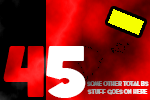
<style>
.page{position:relative;width:150px;height:100px}
.page>*{position:absolute;margin:0}
.t1{font:66px "WhoopAss"}
.t2{font:66px "WhoopAss";color:#ffffff}
.t3{font:6px "WhoopAss"}
</style>
<div class="page">
<p class="t1" style="left:3px;top:46px;width:41px;height:51px">4</p>
<p class="t2" style="left:46px;top:46px;width:40px;height:52px">5</p>
<p class="t3" style="left:87px;top:81px;width:62px;height:14px;text-align:center">some other total BS<br>stuff goes on here</p>
</div>
